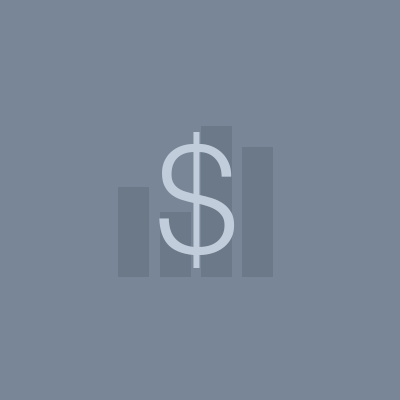
<style>
.page{position:relative;width:400px;height:400px;background:#788697}
.page>*{position:absolute;margin:0}
.t1{font:150px "HelveticaNeue-Light";color:#c1cdda}
</style>
<div class="page">
<p class="t1" style="left:159px;top:132px;width:76px;height:136px">$</p>
</div>
